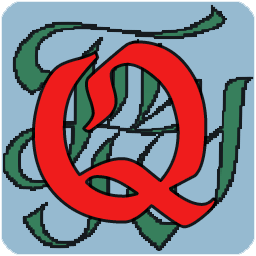
<style>
.page{position:relative;width:256px;height:256px;background:#96bad0}
.page>*{position:absolute;margin:0}
.t1{font:250px "Mathematica6";color:#ef1c1c;font-weight:bold}
</style>
<div class="page">
<p class="t1" style="left:33px;top:42px;width:183px;height:185px">Q</p>
</div>
